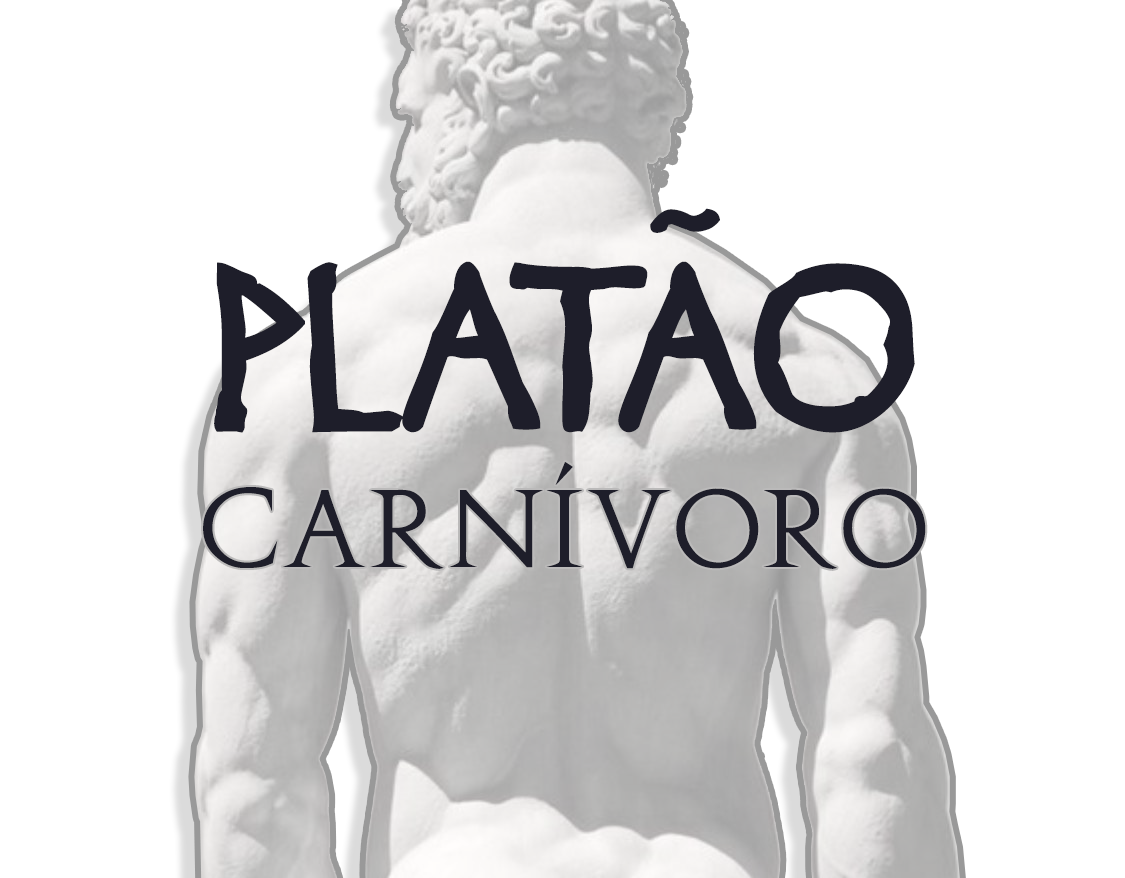
<style>
.page{position:relative;width:1125px;height:878px;background:#ffffff}
.page>*{position:absolute;margin:0}
.t1{font:211.8px "Diogenes";color:#1e1e2a}
.t2{font:103.8px "Augustus";color:#1e1e2a}
</style>
<div class="page">
<p class="t1" style="left:214px;top:208px;width:701px;height:225px">PLATÃO</p>
<p class="t2" style="left:203px;top:462px;width:723px;height:107px">CARNÍVORO</p>
</div>
